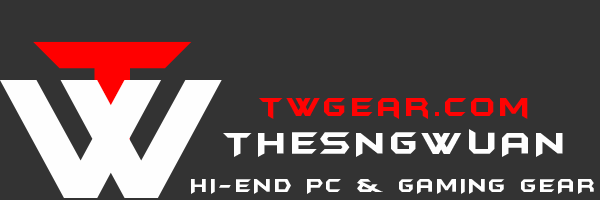
<style>
.page{position:relative;width:600px;height:200px;background:#333333}
.page>*{position:absolute;margin:0}
.t1{font:200px "SVN-BatmanForeverAlternate";letter-spacing:0.1em}
.t2{font:200px "SVN-BatmanForeverAlternate";letter-spacing:0.1em;color:#fefefe}
.t3{font:30px "SVN-BatmanForeverAlternate";letter-spacing:0.1em;color:#ff0303}
.t4{font:36px "SVN-BatmanForeverAlternate";letter-spacing:0.1em;color:#fefefe}
.t5{font:21px "SVN-BatmanForeverAlternate";letter-spacing:0.1em;color:#fefefe}
</style>
<div class="page">
<p class="t1" style="left:33px;top:41px;width:159px;height:139px">T</p>
<p class="t2" style="left:0px;top:80px;width:222px;height:118px">W</p>
<p class="t3" style="left:259px;top:98px;width:269px;height:21px">twgear.com</p>
<p class="t4" style="left:223px;top:129px;width:340px;height:28px">THESNGWUAN</p>
<p class="t5" style="left:191px;top:179px;width:403px;height:15px">HI-END PC &amp; GAMING GEAR</p>
</div>
